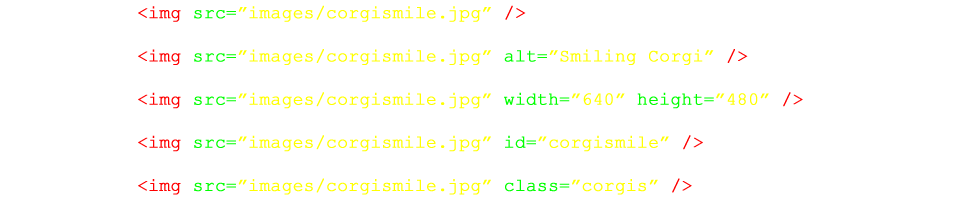
<style>
.page{position:relative;width:960px;height:200px;background:#ffffff}
.page>*{position:absolute;margin:0}
.t1{font:18px "CourierNewPSMT";letter-spacing:-0.01em;color:#ffff00;font-weight:bold}
.t2{font:18px "CourierNewPSMT";letter-spacing:-0.01em;color:#ff0000;font-weight:bold}
.t3{font:18px "CourierNewPSMT";letter-spacing:-0.01em;color:#00ff00;font-weight:bold}
.t4{font:18px "CourierNewPSMT";letter-spacing:-0.01em;color:#fe0000;font-weight:bold}
</style>
<div class="page">
<p class="t1" style="left:138px;top:5px;width:665px;height:190px"><span class="t2">&lt;img </span><span class="t3">src=</span>”images/corgismile.jpg” <span class="t2">/&gt;<br><br></span><span class="t4">&lt;img </span><span class="t3">src=</span>”images/corgismile.jpg”<span class="t3"> alt=</span>”Smiling Corgi” <span class="t2">/&gt;<br><br>&lt;img </span><span class="t3">src=</span>”images/corgismile.jpg”<span class="t3"> width=</span>”640”<span class="t3"> height=</span>”480” <span class="t2">/&gt;<br><br>&lt;img </span><span class="t3">src=</span>”images/corgismile.jpg”<span class="t3"> id=</span>”corgismile” <span class="t2">/&gt;<br><br>&lt;img </span><span class="t3">src=</span>”images/corgismile.jpg”<span class="t3"> class=</span>”corgis” <span class="t2">/&gt;</span></p>
</div>
